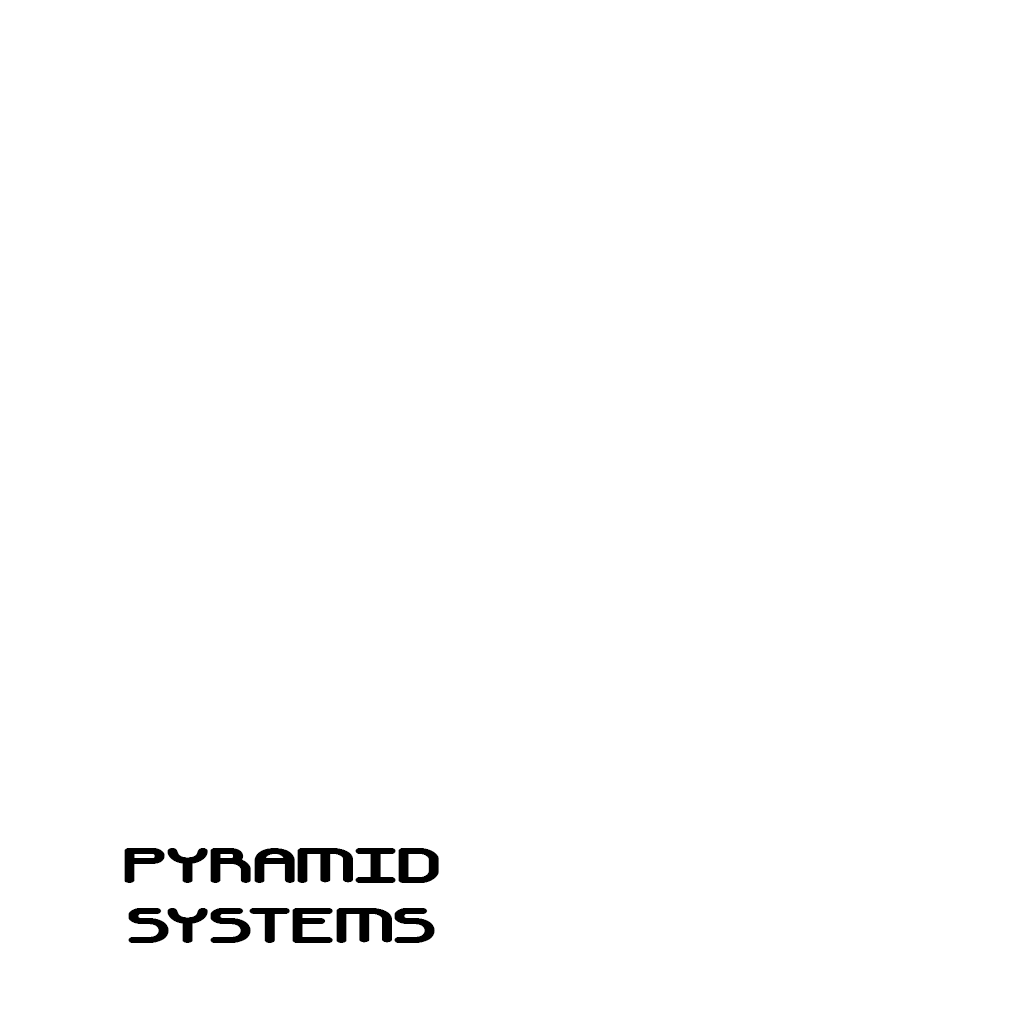
<style>
.page{position:relative;width:1028px;height:1028px;background:#ffffff}
.page>*{position:absolute;margin:0}
.t1{font:50px "AutomaticaBRK";color:#000000}
</style>
<div class="page">
<p class="t1" style="left:124px;top:848px;width:315px;height:95px;text-align:center">PYRAMID<br>SYSTEMS</p>
</div>
